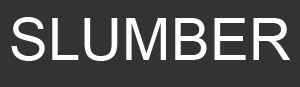
<style>
.page{position:relative;width:300px;height:87px;background:#333333}
.page>*{position:absolute;margin:0}
.t1{font:58.3px "ArialMT";color:#fefefe}
</style>
<div class="page">
<p class="t1" style="left:11px;top:17px;width:279px;height:44px">SLUMBER</p>
</div>
